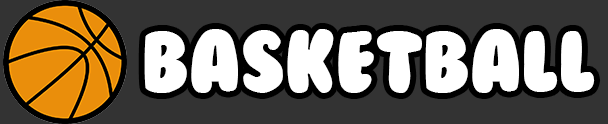
<style>
.page{position:relative;width:608px;height:124px;background:#333333}
.page>*{position:absolute;margin:0}
.t1{font:80px "BubbleGum";color:#ffffff}
</style>
<div class="page">
<p class="t1" style="left:144px;top:29px;width:451px;height:64px">BasketBall</p>
</div>
